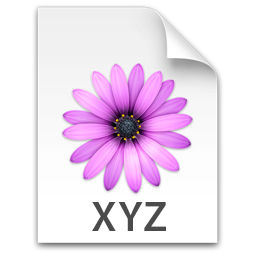
<style>
.page{position:relative;width:256px;height:256px;background:#ffffff}
.page>*{position:absolute;margin:0}
.t1{font:43px "MyriadPro-Semibold";letter-spacing:0.02em;color:#4b4b4b}
</style>
<div class="page">
<p class="t1" style="left:92px;top:202px;width:74px;height:29px">XYZ</p>
</div>
